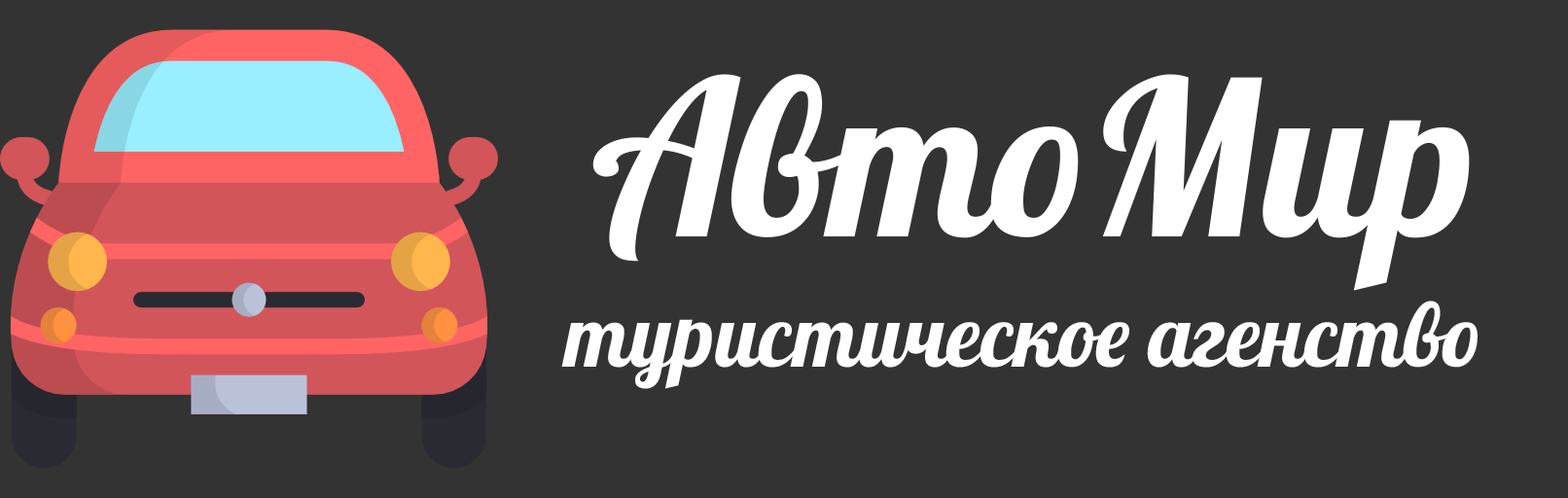
<style>
.page{position:relative;width:1568px;height:498px;background:#333333}
.page>*{position:absolute;margin:0}
.t1{font:215.9px "Lobster";color:#fefefe}
.t2{font:87.5px "Lobster";color:#fefefe}
</style>
<div class="page">
<p class="t1" style="left:592px;top:74px;width:878px;height:217px">АвтоМир</p>
<p class="t2" style="left:561px;top:301px;width:917px;height:88px">туристическое агенство</p>
</div>
